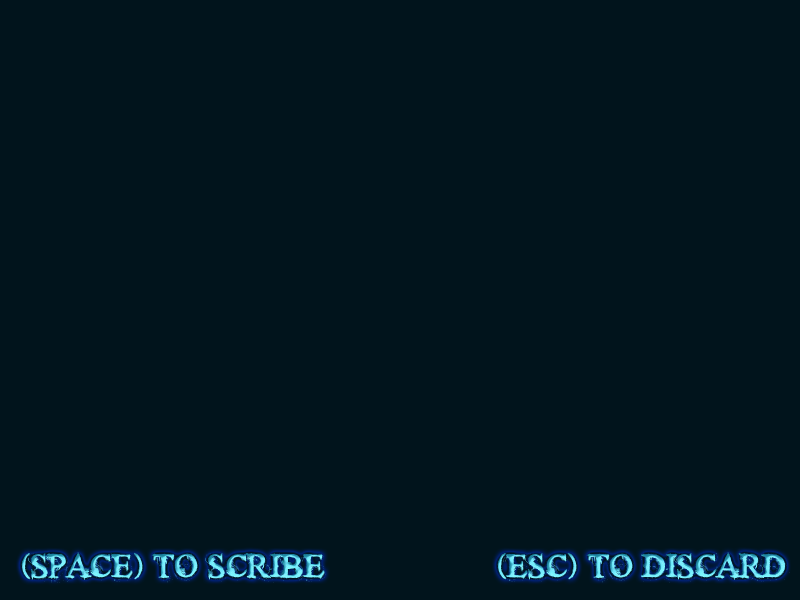
<style>
.page{position:relative;width:800px;height:600px;background:#01141c}
.page>*{position:absolute;margin:0}
.t1{font:34px "TimesNewYorker"}
</style>
<div class="page">
<p class="t1" style="left:21px;top:551px;width:305px;height:32px">(SPACE) TO SCRIBE</p>
<p class="t1" style="left:497px;top:552px;width:293px;height:31px">(ESC) TO DISCARD</p>
</div>
